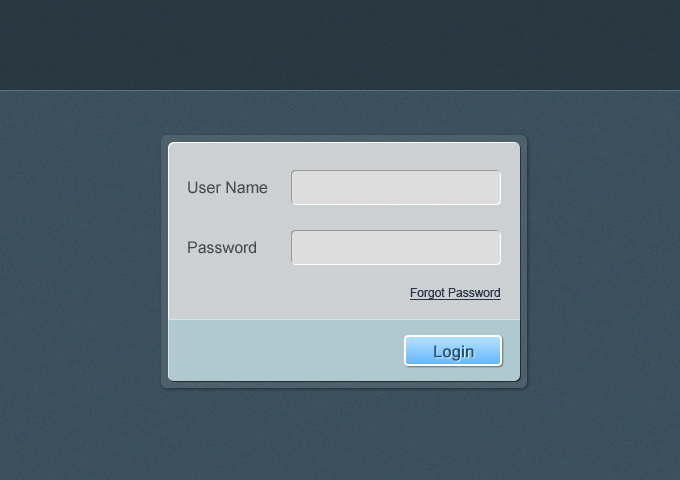
<style>
.page{position:relative;width:680px;height:480px}
.page>*{position:absolute;margin:0}
.t1{font:16px "ArialMT";color:#484949}
.t2{font:12px "ArialMT";color:#293544;text-decoration:underline}
.t3{font:16px "ArialMT";color:#28567b;font-weight:bold}
</style>
<div class="page">
<p class="t1" style="left:188px;top:181px;width:80px;height:13px">User Name</p>
<p class="t1" style="left:188px;top:241px;width:68px;height:13px">Password</p>
<p class="t2" style="left:410px;top:288px;width:91px;height:12px">Forgot Password</p>
<p class="t3" style="left:434px;top:345px;width:40px;height:16px">Login</p>
</div>
